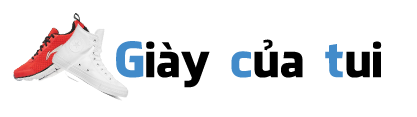
<style>
.page{position:relative;width:417px;height:117px;background:#ffffff}
.page>*{position:absolute;margin:0}
.t1{font:48px "UTM-Facebook";color:#000000}
.t2{font:48px "UTM-Facebook";color:#428bca}
</style>
<div class="page">
<p class="t1" style="left:116px;top:39px;width:266px;height:49px"><span class="t2">G</span>iày <span class="t2">c</span>ủa <span class="t2">t</span>ui</p>
</div>
